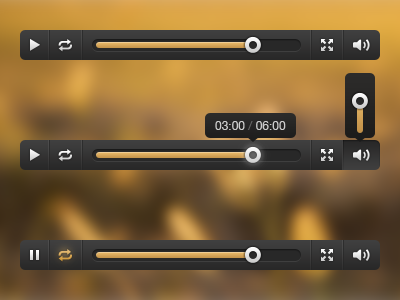
<style>
.page{position:relative;width:400px;height:300px}
.page>*{position:absolute;margin:0}
.t1{font:12px "HelveticaNeue";color:#cccccc}
.t2{font:12px "HelveticaNeue";color:#666666}
</style>
<div class="page">
<p class="t1" style="left:215px;top:121px;width:71px;height:9px">03:00<span class="t2"> / </span>06:00</p>
</div>
